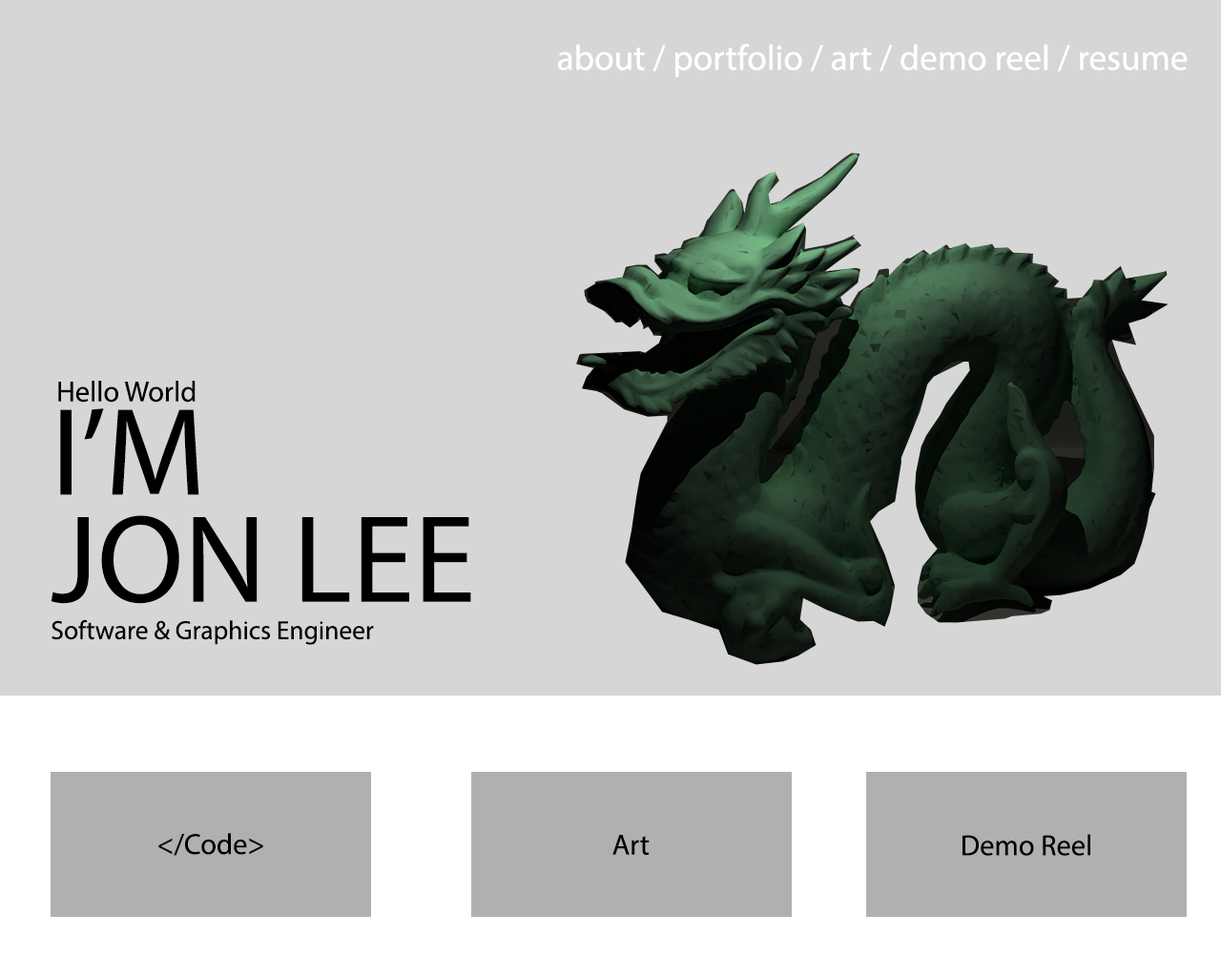
<style>
.page{position:relative;width:1221px;height:977px;background:#d6d6d6}
.page>*{position:absolute;margin:0}
.t1{font:35.7px "MyriadPro-Regular";color:#ffffff}
.t2{font:29px "MyriadPro-Regular";color:#000000}
.t3{font:26.2px/0px "MyriadPro-Regular";color:#000000}
.t4{font:125.4px/7.3px "MyriadPro-Regular";color:#000000}
.t5{font:125.4px/0px "MyriadPro-Regular";color:#000000}
.t6{font:26.2px/7.3px "MyriadPro-Regular";color:#000000}
</style>
<div class="page">
<p class="t1" style="left:558px;top:44px;width:629px;height:33px">about / portfolio / art / demo reel / resume</p>
<p class="t2" style="left:58px;top:381px;width:138px;height:22px">Hello World</p>
<p class="t3" style="left:51px;top:408px;width:420px;height:237px"><span class="t4">I’M<br></span><span class="t5">JON LEE<br></span>Software &amp; Graphics Engine<span class="t6">er</span></p>
<p class="t2" style="left:158px;top:833px;width:105px;height:23px">&lt;/Code&gt;</p>
<p class="t2" style="left:962px;top:834px;width:128px;height:22px">Demo Reel</p>
<p class="t2" style="left:612px;top:835px;width:38px;height:20px">Art</p>
</div>
